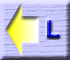
<style>
.page{position:relative;width:70px;height:60px}
.page>*{position:absolute;margin:0}
.t1{font:24px "Arial-BoldMT"}
</style>
<div class="page">
<p class="t1" style="left:47px;top:20px;width:13px;height:18px">L</p>
</div>
